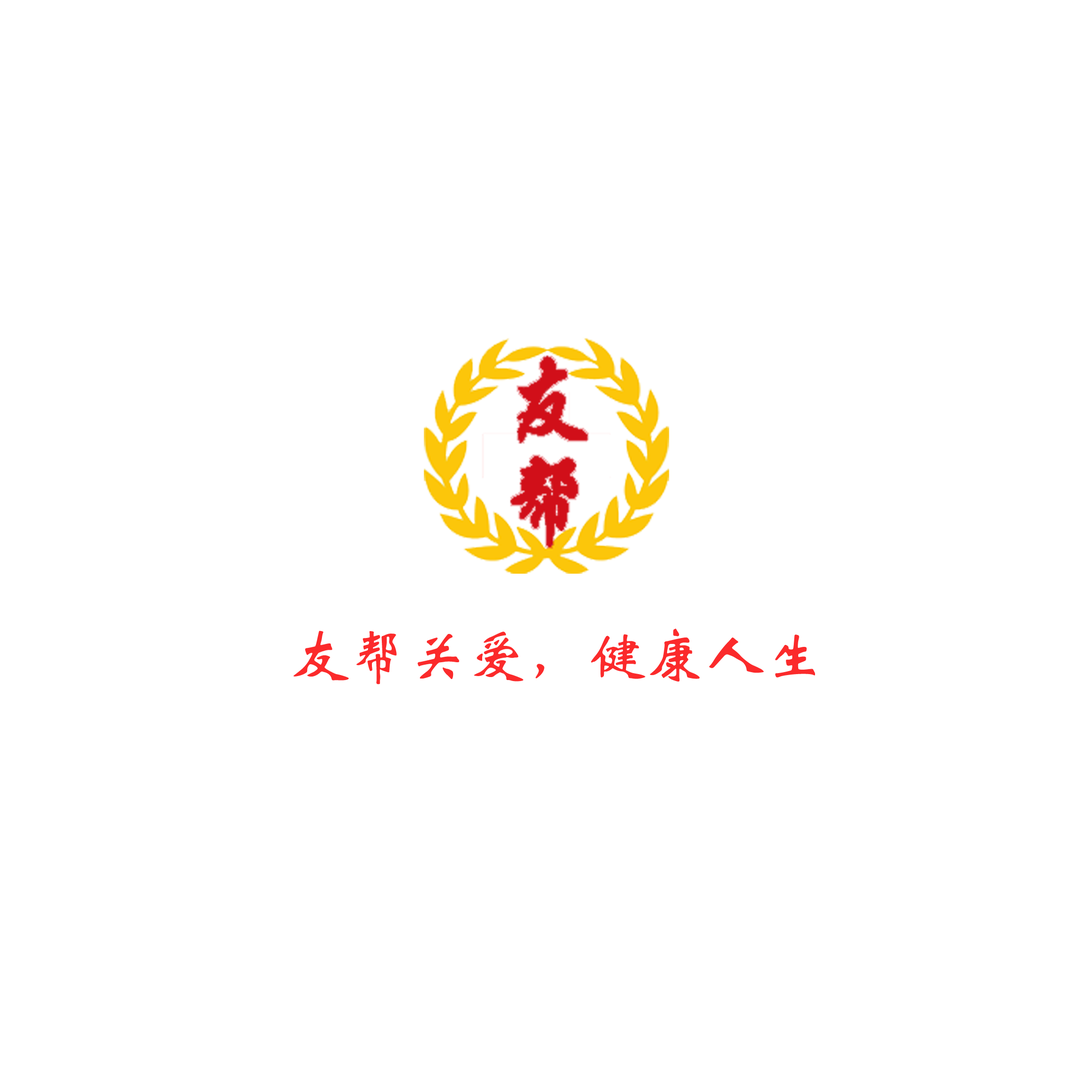
<style>
.page{position:relative;width:1092px;height:1092px;background:#ffffff}
.page>*{position:absolute;margin:0}
.t1{font:59.3px "STXinwei";color:#fb2a2b}
</style>
<div class="page">
<p class="t1" style="left:293px;top:629px;width:522px;height:55px">友帮关爱，健康人生</p>
</div>
